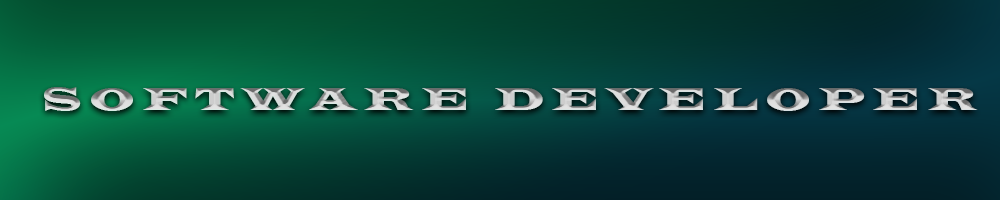
<style>
.page{position:relative;width:1000px;height:200px}
.page>*{position:absolute;margin:0}
.t1{font:33.3px "LatinWide";letter-spacing:0.24em}
</style>
<div class="page">
<p class="t1" style="left:44px;top:87px;width:934px;height:24px">SOFTWARE DEVELOPER</p>
</div>
